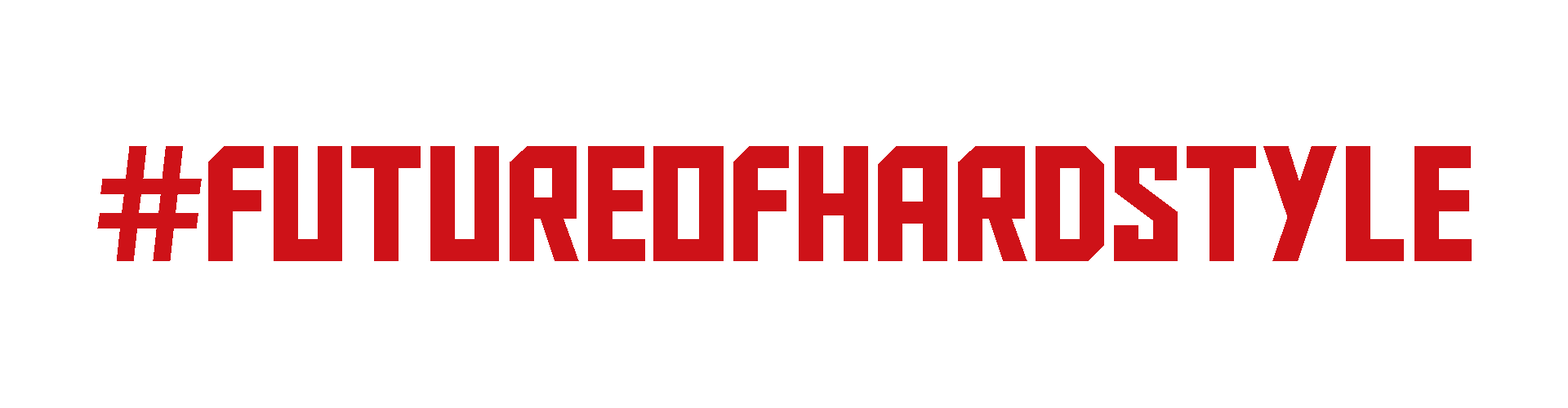
<style>
.page{position:relative;width:1568px;height:408px;background:#ffffff}
.page>*{position:absolute;margin:0}
.t1{font:163.3px "AldotheApache";color:#ce1218}
</style>
<div class="page">
<p class="t1" style="left:97px;top:146px;width:1375px;height:115px">#FUTUREOFHARDSTYLE</p>
</div>
